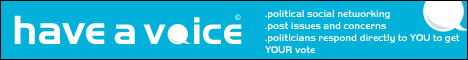
<style>
.page{position:relative;width:468px;height:60px;background:#01b1da}
.page>*{position:absolute;margin:0}
.t1{font:42.5px "HandelGotD-Bold";color:#ffffff}
.t2{font:40.3px "HandelGotD-Bold";color:#ffffff}
.t3{font:40.3px "HandelGotD-Bold";letter-spacing:0.025em;color:#ffffff}
.t4{font:10px "HandelGotD-Bold";color:#ffffff}
</style>
<div class="page">
<p class="t1" style="left:14px;top:15px;width:91px;height:29px">have</p>
<p class="t2" style="left:114px;top:17px;width:128px;height:27px">a <span class="t3">v  </span>ice</p>
<p class="t4" style="left:265px;top:10px;width:195px;height:43px">.political social networking<br>.post issues and concerns<br>.politicians respond directly to YOU to get<br>YOUR vote</p>
</div>
